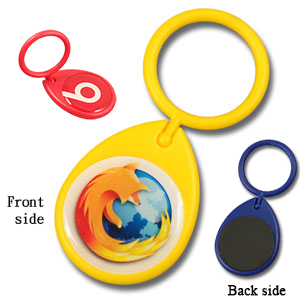
<style>
.page{position:relative;width:300px;height:300px;background:#ffffff}
.page>*{position:absolute;margin:0}
.t1{font:14px "DFKaiShu-SB-Estd-BF";color:#070707;font-weight:bold}
.t2{font:14px "TimesNewRomanPSMT";color:#070707;font-weight:bold}
</style>
<div class="page">
<p class="t1" style="left:7px;top:196px;width:37px;height:29px">Front<br> side</p>
<p class="t2" style="left:227px;top:285px;width:59px;height:11px">Back side</p>
</div>
